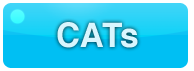
<style>
.page{position:relative;width:194px;height:71px;background:#00bff3}
.page>*{position:absolute;margin:0}
.t1{font:33.6px "Helvetica-Bold";color:#d8f6fe}
</style>
<div class="page">
<p class="t1" style="left:57px;top:22px;width:81px;height:26px">CATs</p>
</div>
